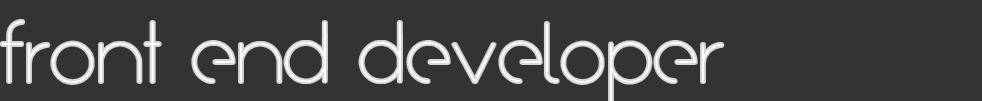
<style>
.page{position:relative;width:982px;height:101px;background:#333333}
.page>*{position:absolute;margin:0}
.t1{font:72px "Arual";color:#ffffff}
</style>
<div class="page">
<p class="t1" style="left:1px;top:21px;width:722px;height:80px">front end developer</p>
</div>
